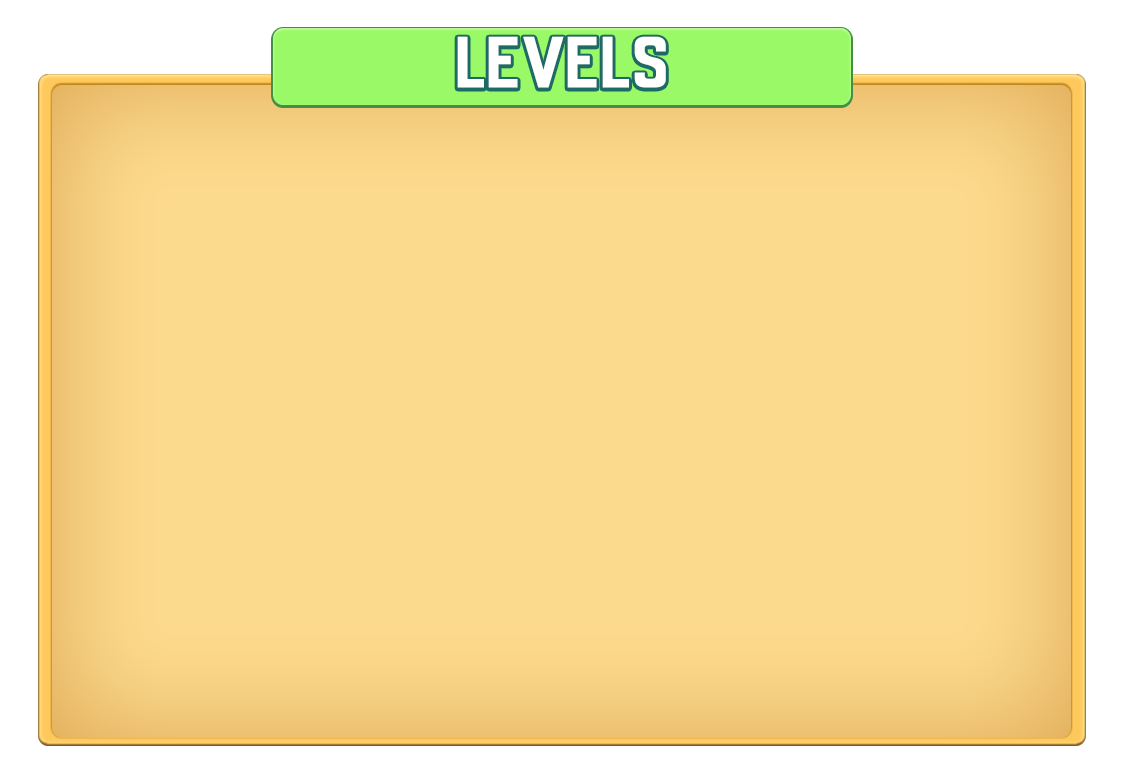
<style>
.page{position:relative;width:1124px;height:774px;background:#fcda8d}
.page>*{position:absolute;margin:0}
.t1{font:65.6px "UniversalKnowledge";letter-spacing:-0.02em;color:#ffffff;scale:1.14 1}
</style>
<div class="page">
<p class="t1" style="left:457px;top:36px;width:209px;height:52px">LEVELS</p>
</div>
